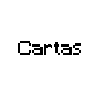
<style>
.page{position:relative;width:100px;height:100px;background:#ffffff}
.page>*{position:absolute;margin:0}
.t1{font:19px "Minecraft";color:#000000}
</style>
<div class="page">
<p class="t1" style="left:18px;top:41px;width:63px;height:14px">Cartas</p>
</div>
